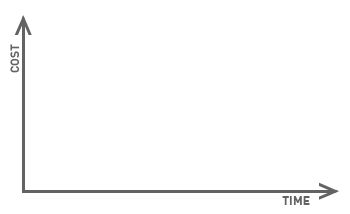
<style>
.page{position:relative;width:350px;height:214px;background:#ffffff}
.page>*{position:absolute;margin:0}
.t1{font:12px "DIN-Bold";letter-spacing:-0.02em;color:#636363}
</style>
<div class="page">
<p class="t1" style="left:10px;top:44px;width:10px;height:29px;rotate:-90deg">COST</p>
<p class="t1" style="left:282px;top:196px;width:28px;height:9px">TIME</p>
</div>
